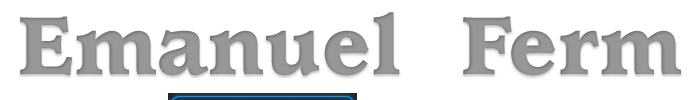
<style>
.page{position:relative;width:700px;height:100px;background:#ffffff}
.page>*{position:absolute;margin:0}
.t1{font:90px "UsherwoodStd-Black";color:#979797}
</style>
<div class="page">
<p class="t1" style="left:20px;top:12px;width:661px;height:64px">Emanuel  Ferm</p>
</div>
